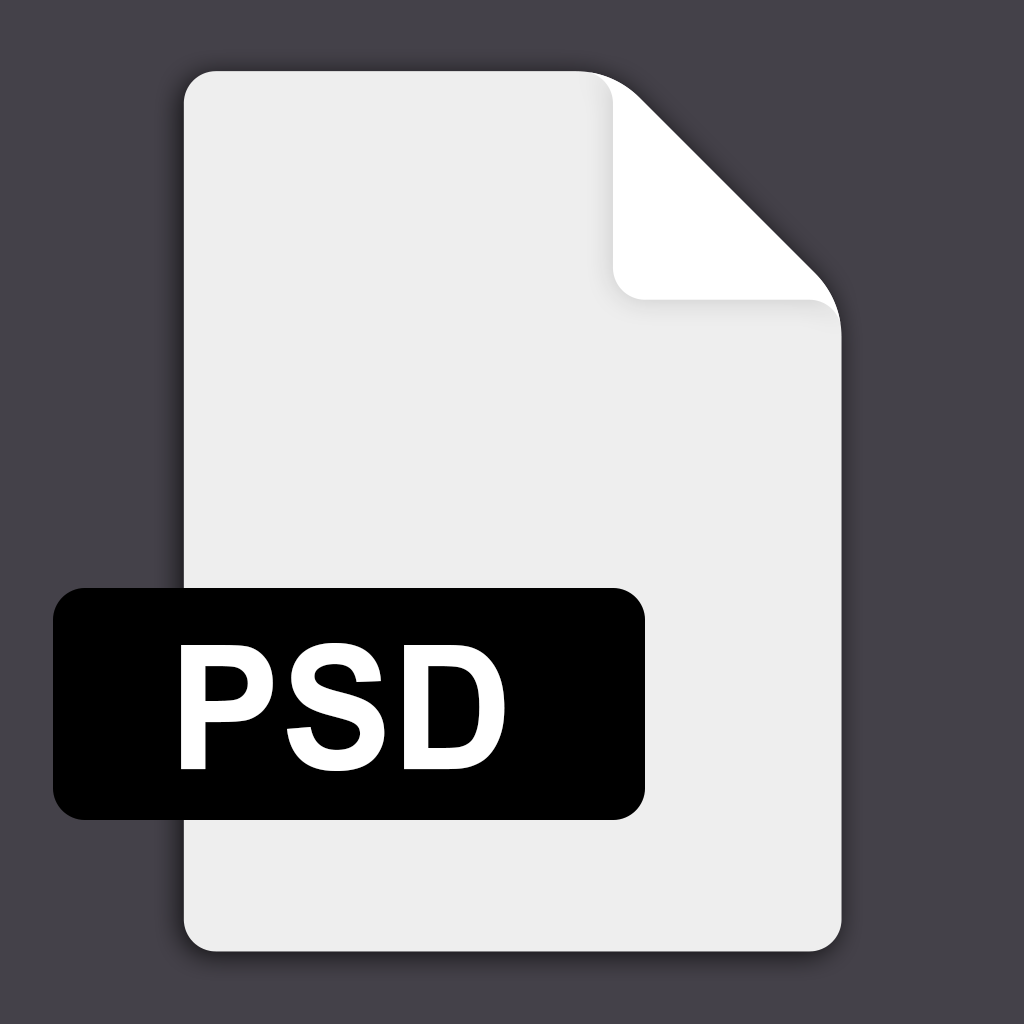
<style>
.page{position:relative;width:1024px;height:1024px;background:#eeeeee}
.page>*{position:absolute;margin:0}
.t1{font:172.6px "Arial-BoldMT";color:#ffffff}
</style>
<div class="page">
<p class="t1" style="left:181px;top:643px;width:324px;height:128px">PSD</p>
</div>
